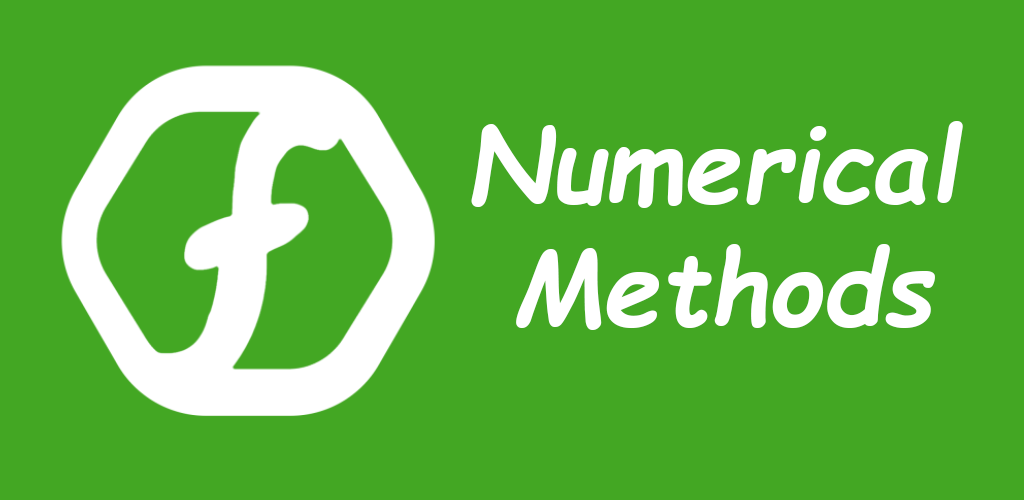
<style>
.page{position:relative;width:1024px;height:500px;background:#43a723}
.page>*{position:absolute;margin:0}
.t1{font:103px/123px "ComicSansMS-BoldItalic";color:#ffffff}
</style>
<div class="page">
<p class="t1" style="left:471px;top:121px;width:492px;height:209px">Numerical<br> Methods</p>
</div>
